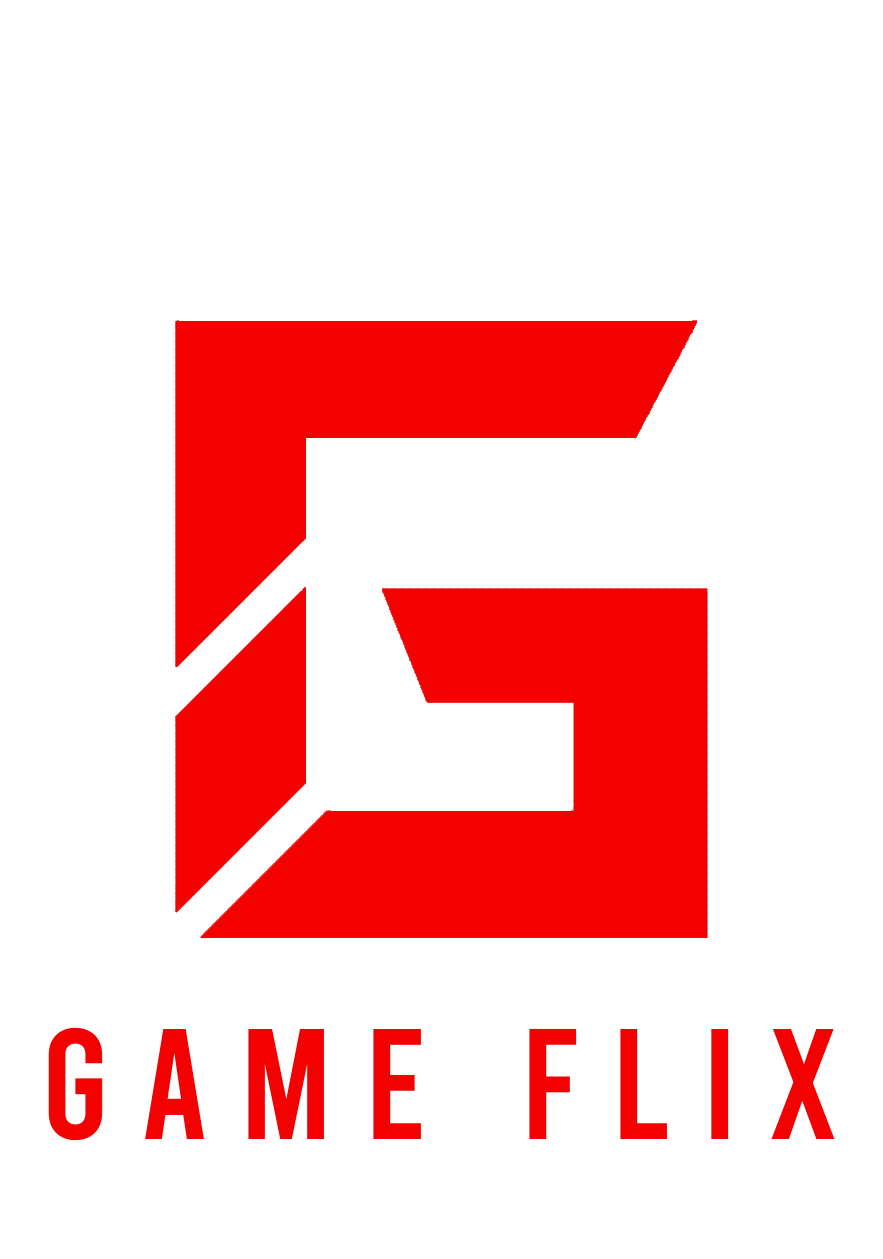
<style>
.page{position:relative;width:883px;height:1259px;background:#ffffff}
.page>*{position:absolute;margin:0}
.t1{font:157.4px "Bebas-Regular";color:#f30000}
</style>
<div class="page">
<p class="t1" style="left:48px;top:1027px;width:787px;height:114px">G A M E   F L I X</p>
</div>
